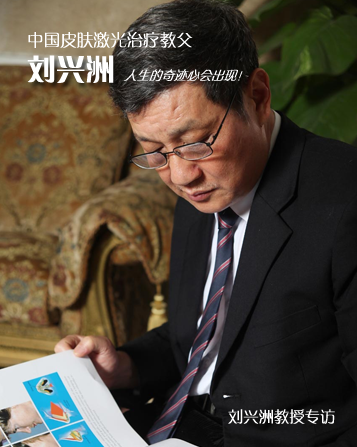
<style>
.page{position:relative;width:357px;height:447px}
.page>*{position:absolute;margin:0}
.t1{font:16.6px "FZZQJW--GB1-0";color:#ffffff}
.t2{font:29.2px "FZCQJW--GB1-0";color:#ffffff}
.t3{font:13.3px "FZZQJW--GB1-0";color:#ffffff;scale:0.94 1}
.t4{font:15.3px "FZZQJW--GB1-0";color:#ffffff}
</style>
<div class="page">
<p class="t1" style="left:28px;top:32px;width:165px;height:16px">中国皮肤激光治疗教父</p>
<p class="t2" style="left:27px;top:55px;width:87px;height:28px">刘兴洲</p>
<p class="t3" style="left:123px;top:69px;width:120px;height:12px">人生的奇迹必会出现！</p>
<p class="t4" style="left:228px;top:409px;width:107px;height:15px">刘兴洲教授专访</p>
</div>
